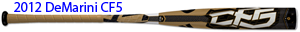
<style>
.page{position:relative;width:300px;height:32px;background:#ffffff}
.page>*{position:absolute;margin:0}
.t1{font:14px "MyriadPro-Regular";color:#0000ff}
</style>
<div class="page">
<p class="t1" style="left:14px;top:2px;width:108px;height:10px">2012 DeMarini CF5</p>
</div>
